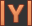
<style>
.page{position:relative;width:32px;height:26px;background:#333333}
.page>*{position:absolute;margin:0}
.t1{font:24px "Ubuntu-Bold";color:#ef935f}
</style>
<div class="page">
<p class="t1" style="left:8px;top:5px;width:16px;height:17px">Y</p>
</div>
